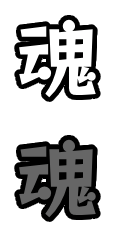
<style>
.page{position:relative;width:120px;height:240px;background:#ffffff}
.page>*{position:absolute;margin:0}
.t1{font:85px "RocknRollOne-Regular";color:#ffffff}
</style>
<div class="page">
<p class="t1" style="left:19px;top:19px;width:77px;height:79px">魂</p>
</div>
